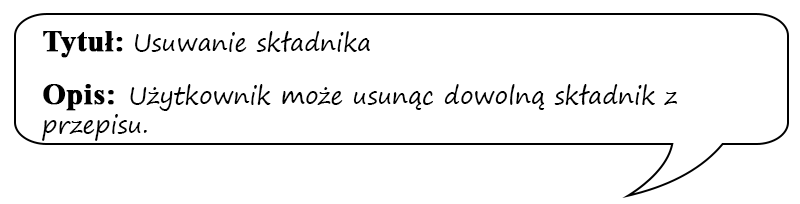
<style>
.page{position:relative;width:800px;height:204px;background:#ffffff}
.page>*{position:absolute;margin:0}
.t1{font:24px "SegoePrint";color:#000000}
.t2{font:30px "TimesNewRomanPS-BoldMT";color:#000000;font-weight:bold}
</style>
<div class="page">
<p class="t1" style="left:42px;top:31px;width:635px;height:110px"><span class="t2">Tytuł: </span>Usuwanie składnika<br><br><span class="t2">Opis:  </span>Użytkownik może usunąc dowolną składnik z przepisu.</p>
</div>
